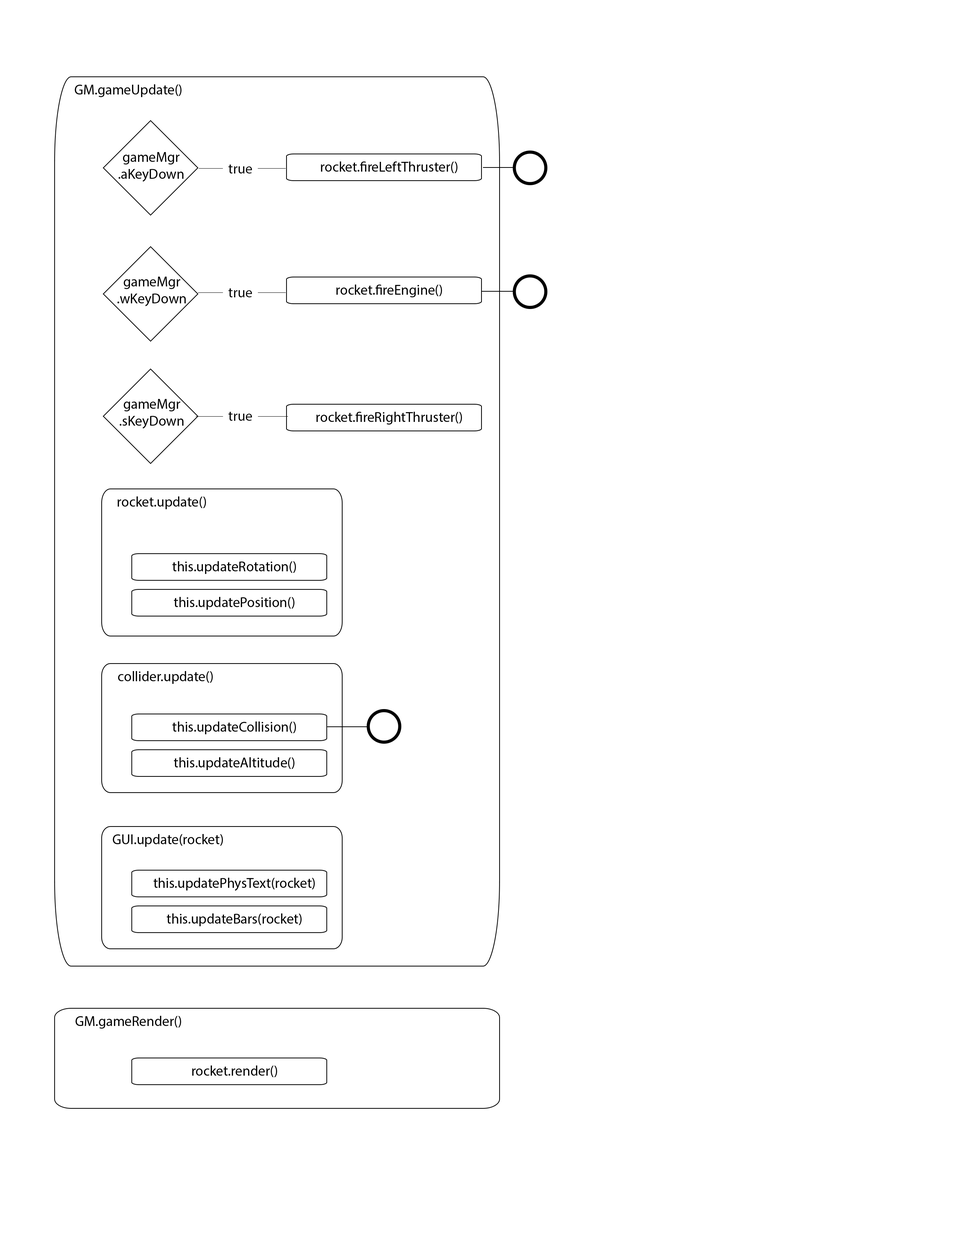
<style>
.page{position:relative;width:960px;height:1242px;background:#ffffff}
.page>*{position:absolute;margin:0}
.t1{font:14.1px "MyriadPro-Regular";color:#000000}
</style>
<div class="page">
<p class="t1" style="left:75px;top:84px;width:106px;height:13px">GM.gameUpdate()</p>
<p class="t1" style="left:119px;top:152px;width:65px;height:30px;text-align:center">gameMgr<br>.aKeyDown</p>
<p class="t1" style="left:321px;top:161px;width:136px;height:12px">rocket.fireLeftThruster()</p>
<p class="t1" style="left:228px;top:164px;width:24px;height:10px">true</p>
<p class="t1" style="left:117px;top:277px;width:69px;height:29px;text-align:center">gameMgr<br>.wKeyDown</p>
<p class="t1" style="left:228px;top:288px;width:24px;height:9px">true</p>
<p class="t1" style="left:336px;top:285px;width:106px;height:12px">rocket.fireEngine()</p>
<p class="t1" style="left:120px;top:399px;width:64px;height:30px;text-align:center">gameMgr<br>.sKeyDown</p>
<p class="t1" style="left:228px;top:411px;width:24px;height:10px">true</p>
<p class="t1" style="left:316px;top:412px;width:146px;height:13px">rocket.fireRightThruster()</p>
<p class="t1" style="left:117px;top:497px;width:89px;height:12px">rocket.update()</p>
<p class="t1" style="left:172px;top:561px;width:124px;height:13px">this.updateRotation()</p>
<p class="t1" style="left:174px;top:597px;width:120px;height:13px">this.updatePosition()</p>
<p class="t1" style="left:118px;top:671px;width:95px;height:13px">collider.update()</p>
<p class="t1" style="left:172px;top:722px;width:124px;height:12px">this.updateCollision()</p>
<p class="t1" style="left:174px;top:757px;width:120px;height:13px">this.updateAltitude()</p>
<p class="t1" style="left:113px;top:834px;width:110px;height:13px">GUI.update(rocket)</p>
<p class="t1" style="left:154px;top:878px;width:161px;height:13px">this.updatePhysText(rocket)</p>
<p class="t1" style="left:167px;top:914px;width:135px;height:12px">this.updateBars(rocket)</p>
<p class="t1" style="left:75px;top:1016px;width:106px;height:13px">GM.gameRender()</p>
<p class="t1" style="left:192px;top:1066px;width:85px;height:11px">rocket.render()</p>
</div>
